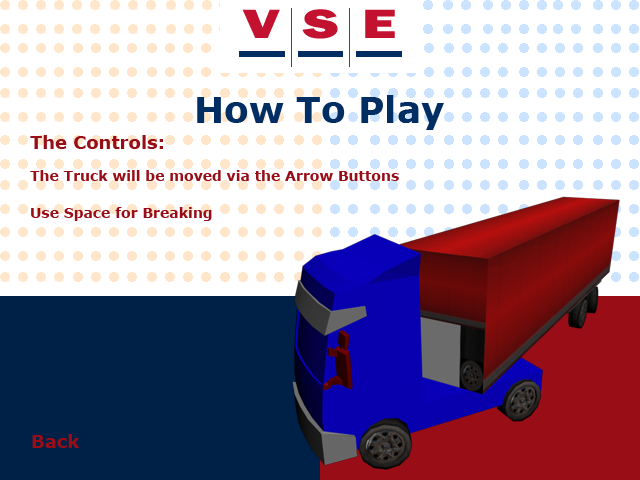
<style>
.page{position:relative;width:640px;height:480px;background:#ffffff}
.page>*{position:absolute;margin:0}
.t1{font:36px "Verdana-Bold";color:#002d62}
.t2{font:18px "Verdana-Bold";color:#990e17}
.t3{font:14px "Verdana-Bold";color:#990e17}
</style>
<div class="page">
<p class="t1" style="left:197px;top:95px;width:247px;height:35px">How To Play</p>
<p class="t2" style="left:30px;top:135px;width:133px;height:14px">The Controls:</p>
<p class="t3" style="left:30px;top:170px;width:369px;height:11px">The Truck will be moved via the Arrow Buttons</p>
<p class="t3" style="left:31px;top:207px;width:181px;height:14px">Use Space for Breaking</p>
<p class="t2" style="left:32px;top:434px;width:48px;height:14px">Back</p>
</div>
